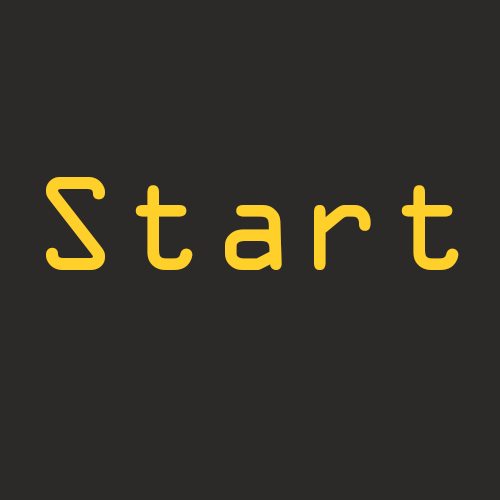
<style>
.page{position:relative;width:500px;height:500px;background:#2c2a28}
.page>*{position:absolute;margin:0}
.t1{font:120px "OCRAStd";letter-spacing:0.02em;color:#ffcf2a}
</style>
<div class="page">
<p class="t1" style="left:46px;top:177px;width:413px;height:93px">Start</p>
</div>
